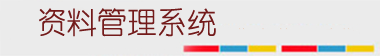
<style>
.page{position:relative;width:380px;height:56px;background:#ebebeb}
.page>*{position:absolute;margin:0}
.t1{font:30px "YouYuan";color:#731b1b}
</style>
<div class="page">
<p class="t1" style="left:39px;top:8px;width:177px;height:29px">资料管理系统</p>
</div>
